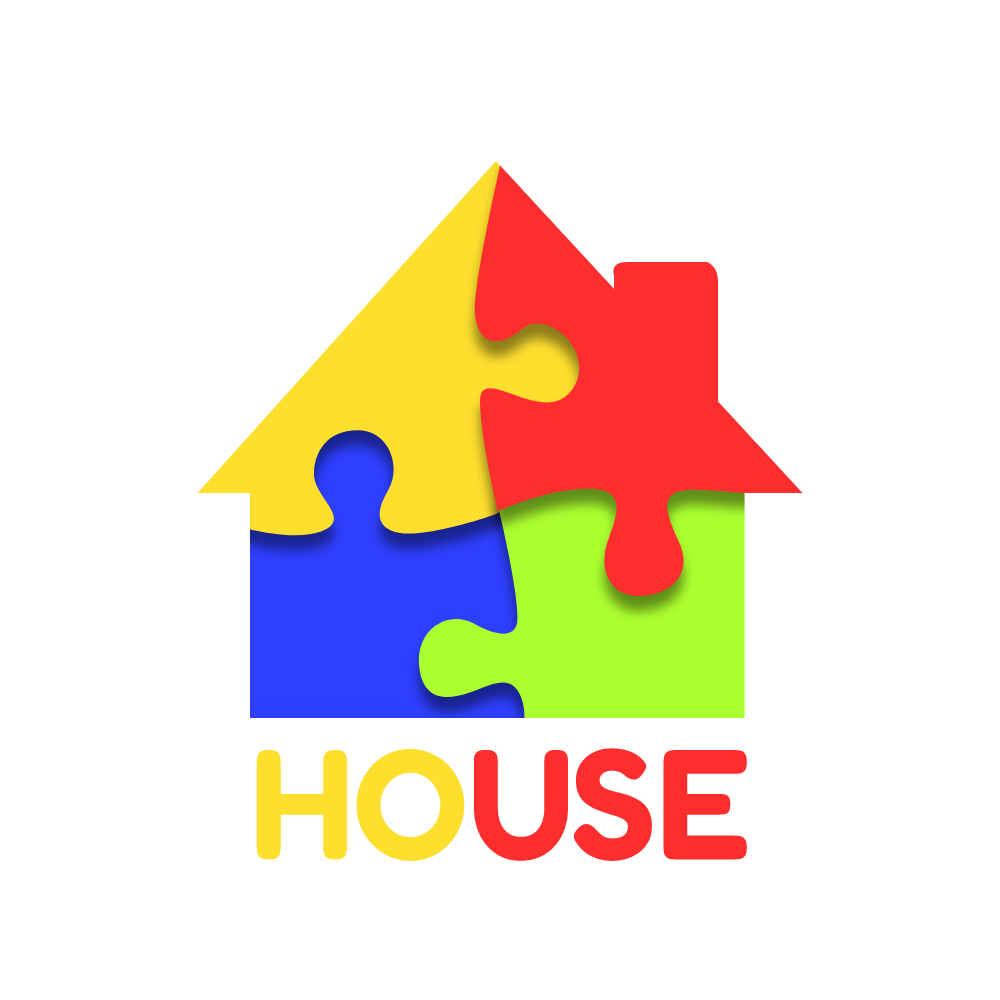
<style>
.page{position:relative;width:1000px;height:1000px;background:#ffffff}
.page>*{position:absolute;margin:0}
.t1{font:156.5px "Fredoka-SemiBold";color:#ff2e2e;text-transform:uppercase}
.t2{font:156.5px "Fredoka-SemiBold";color:#000000;text-transform:uppercase}
.t3{font:156.5px "Fredoka-SemiBold";color:#fedf2e;text-transform:uppercase}
</style>
<div class="page">
<p class="t1" style="left:256px;top:748px;width:491px;height:113px"><span class="t2"><br></span><span class="t3">Ho</span>use</p>
</div>
